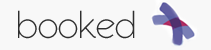
<style>
.page{position:relative;width:211px;height:50px;background:#f8f8f8}
.page>*{position:absolute;margin:0}
.t1{font:40px "RawengulkSans";color:#2f2f2f}
</style>
<div class="page">
<p class="t1" style="left:18px;top:10px;width:117px;height:29px">booked</p>
</div>
